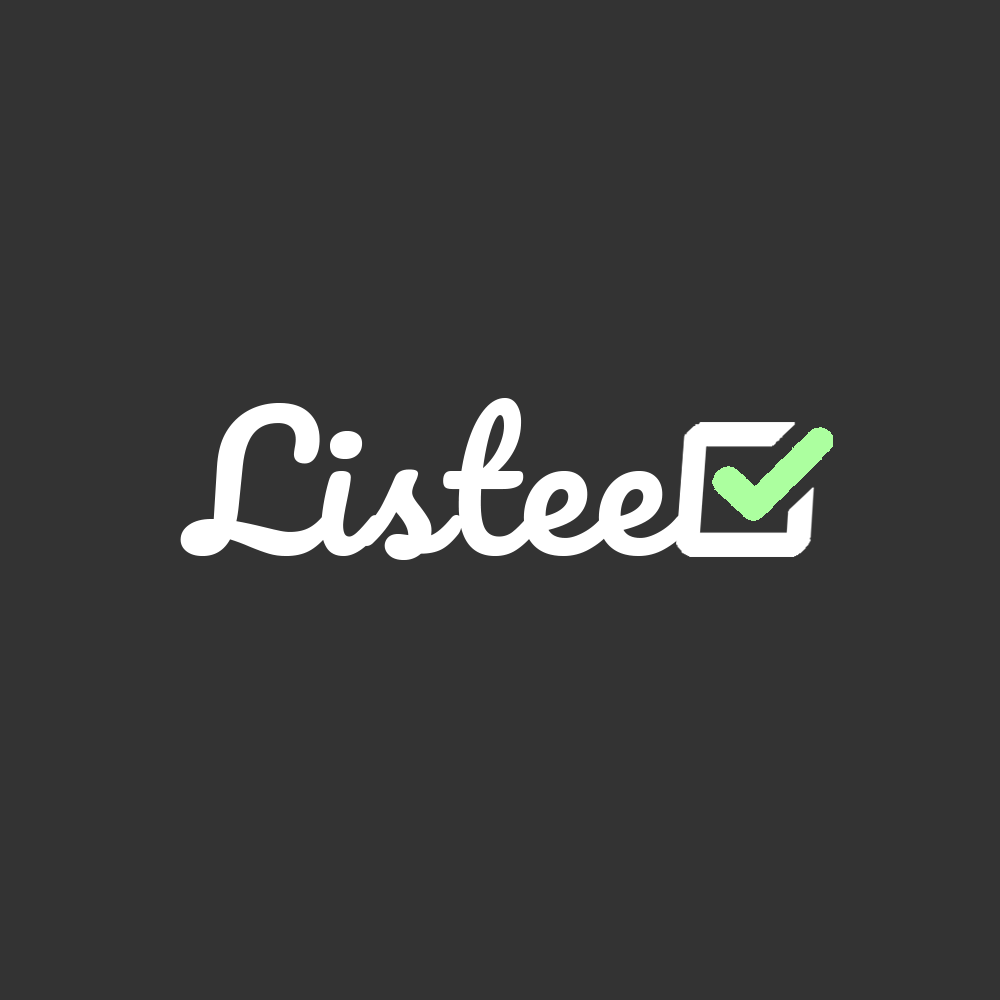
<style>
.page{position:relative;width:1000px;height:1000px;background:#333333}
.page>*{position:absolute;margin:0}
.t1{font:179.2px "Pacifico-Regular";letter-spacing:0.025em;color:#ffffff}
</style>
<div class="page">
<p class="t1" style="left:180px;top:398px;width:507px;height:162px">Listee</p>
</div>
